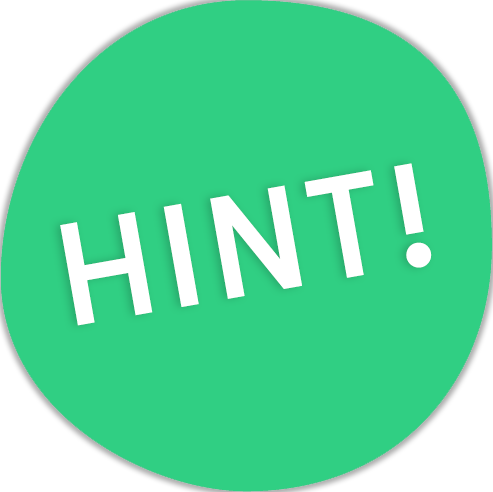
<style>
.page{position:relative;width:493px;height:492px;background:#30cf83}
.page>*{position:absolute;margin:0}
.t1{font:145px "GTWalsheimProMedium";letter-spacing:0.06em;color:#ffffff}
</style>
<div class="page">
<p class="t1" style="left:60px;top:163px;width:372px;height:163px;rotate:-10deg">HINT!</p>
</div>
